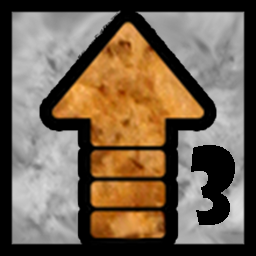
<style>
.page{position:relative;width:256px;height:256px;background:#000000}
.page>*{position:absolute;margin:0}
.t1{font:100px "ShowcardGothic-Reg";color:#000000}
</style>
<div class="page">
<p class="t1" style="left:191px;top:145px;width:44px;height:80px">3</p>
</div>
